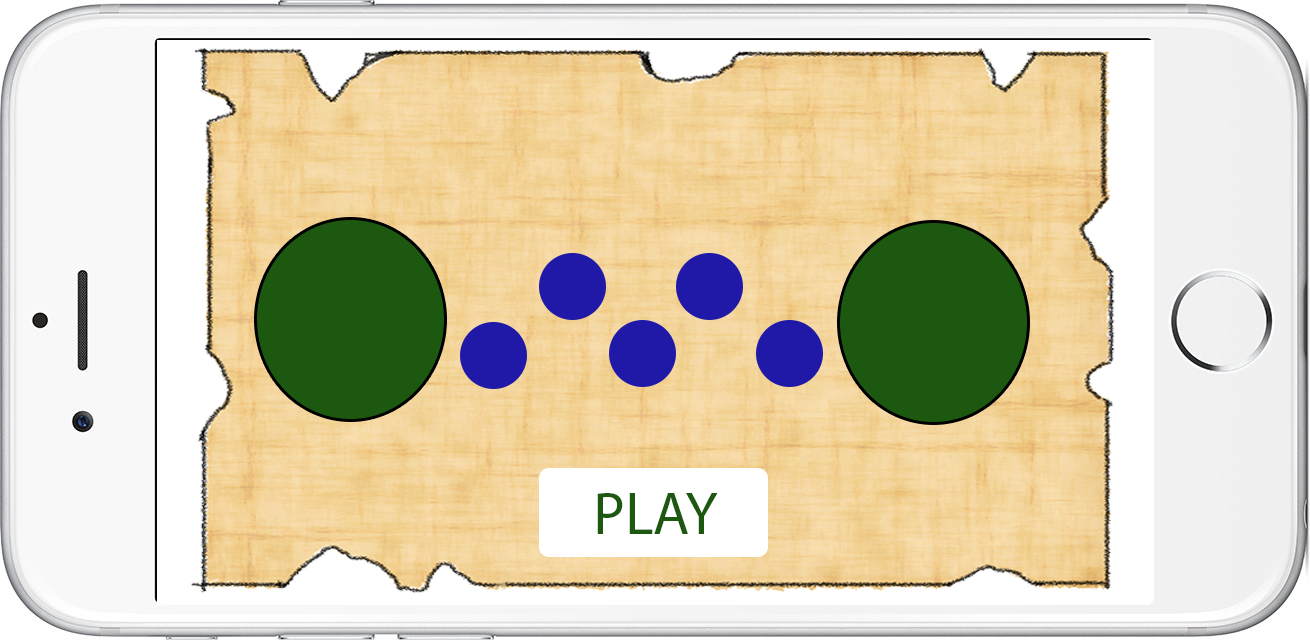
<style>
.page{position:relative;width:1310px;height:640px}
.page>*{position:absolute;margin:0}
.t1{font:60px "MyriadPro-Regular";color:#1d5810}
</style>
<div class="page">
<p class="t1" style="left:597px;top:493px;width:121px;height:41px">PLAY</p>
</div>
